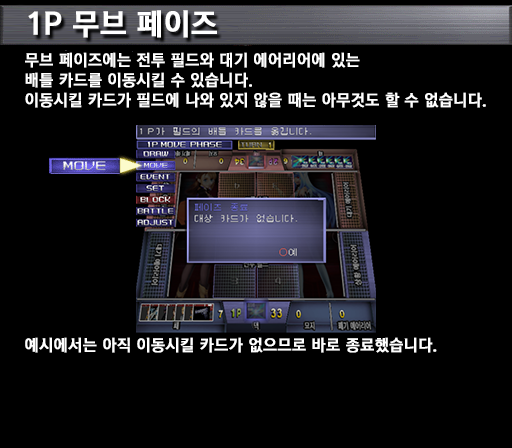
<style>
.page{position:relative;width:512px;height:448px;background:#000000}
.page>*{position:absolute;margin:0}
.t1{font:30px "KoreanGD15-R";color:#ffffff;font-weight:bold}
.t2{font:16px/20px "KoreanGD15-R";color:#ffffff;font-weight:bold}
.t3{font:16px "KoreanGD15-R";color:#ffffff;font-weight:bold}
</style>
<div class="page">
<p class="t1" style="left:28px;top:10px;width:189px;height:28px">1P 무브 페이즈</p>
<p class="t2" style="left:25px;top:52px;width:461px;height:56px">무브 페이즈에는 전투 필드와 대기 에어리어에 있는<br>배틀 카드를 이동시킬 수 있습니다.<br>이동시킬 카드가 필드에 나와 있지 않을 때는 아무것도 할 수 없습니다.</p>
<p class="t3" style="left:25px;top:337px;width:412px;height:16px">예시에서는 아직 이동시킬 카드가 없으므로 바로 종료했습니다.</p>
</div>
